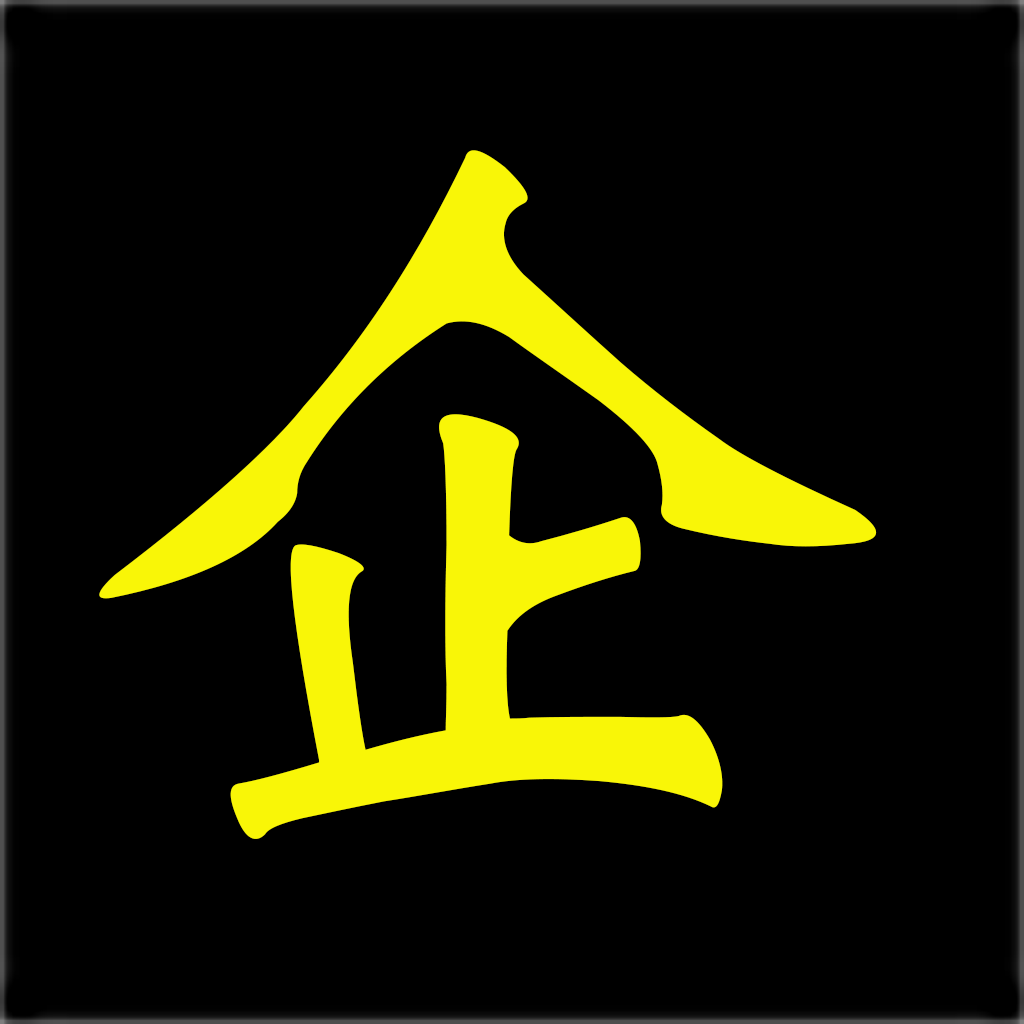
<style>
.page{position:relative;width:1024px;height:1024px;background:#000000}
.page>*{position:absolute;margin:0}
.t1{font:844.4px "Weibei-SC-Bold";color:#f9f607}
</style>
<div class="page">
<p class="t1" style="left:99px;top:150px;width:778px;height:689px">企</p>
</div>
